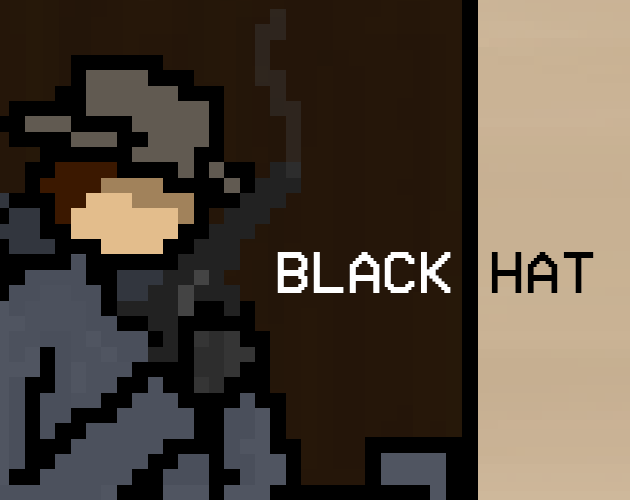
<style>
.page{position:relative;width:630px;height:500px}
.page>*{position:absolute;margin:0}
.t1{font:60px "VCROSDMono";letter-spacing:0.008em;color:#ffffff}
.t2{font:60px "VCROSDMono";letter-spacing:0.008em;color:#000000}
</style>
<div class="page">
<p class="t1" style="left:277px;top:252px;width:317px;height:41px">BLACK<span class="t2"> HAT</span></p>
</div>
